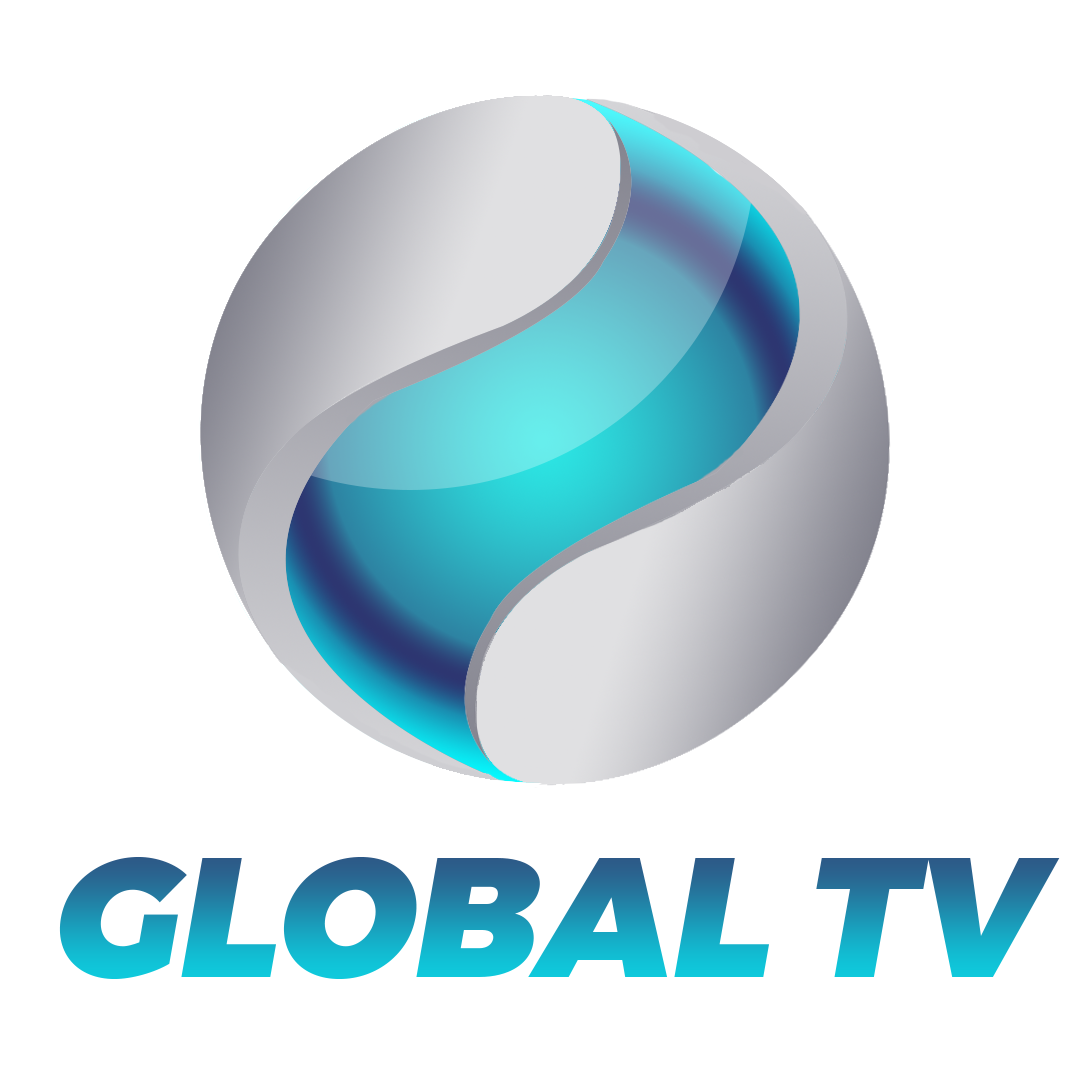
<style>
.page{position:relative;width:1080px;height:1080px;background:#ffffff}
.page>*{position:absolute;margin:0}
.t1{font:169.4px "Montserrat-Black";font-style:italic}
</style>
<div class="page">
<p class="t1" style="left:59px;top:856px;width:1001px;height:123px">GLOBAL TV</p>
<p class="t1" style="left:59px;top:856px;width:1001px;height:123px">GLOBAL TV</p>
</div>
